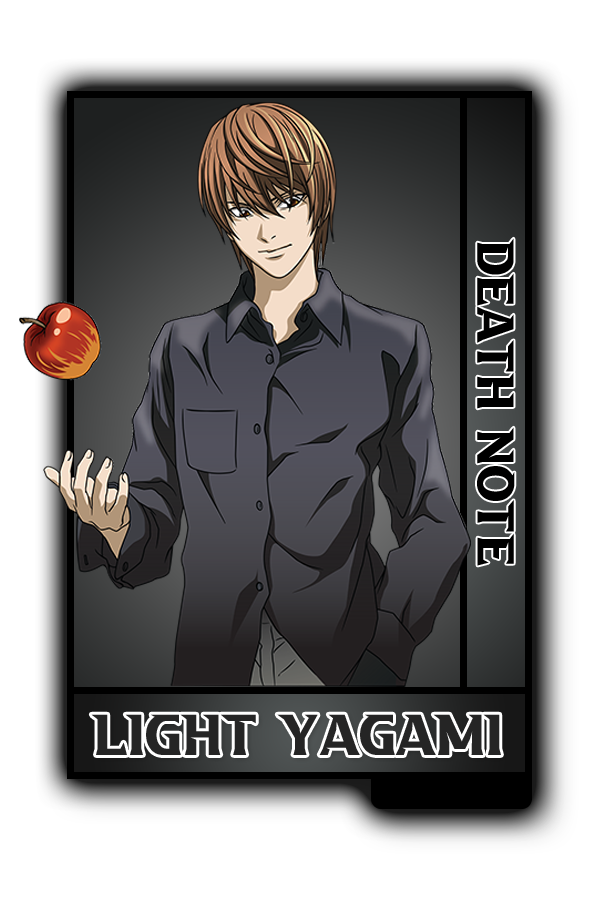
<style>
.page{position:relative;width:600px;height:900px;background:#ffffff}
.page>*{position:absolute;margin:0}
.t1{font:48.8px "aAbsoluteEmpire";color:#000000}
.t2{font:54.2px "aAbsoluteEmpire";color:#252525}
</style>
<div class="page">
<p class="t1" style="left:477px;top:238px;width:38px;height:328px;rotate:90deg">Death Note</p>
<p class="t2" style="left:91px;top:714px;width:410px;height:41px">Light Yagami</p>
</div>
